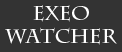
<style>
.page{position:relative;width:122px;height:52px;background:#333333}
.page>*{position:absolute;margin:0}
.t1{font:19.6px "CharlemagneStd-Bold";color:#ffffff}
</style>
<div class="page">
<p class="t1" style="left:5px;top:5px;width:112px;height:40px;text-align:center">EXEO WATCHER</p>
</div>
